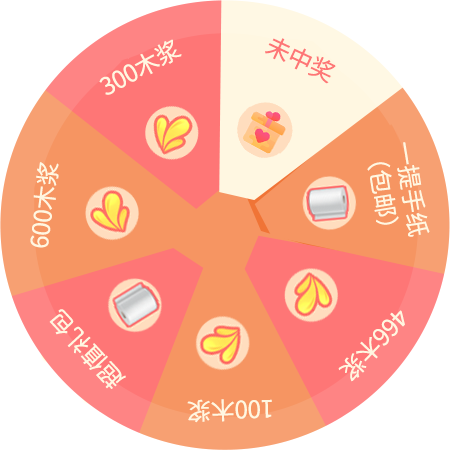
<style>
.page{position:relative;width:450px;height:450px;background:#ffffff}
.page>*{position:absolute;margin:0}
.t1{font:24px "SourceHanSansCN-Regular";color:#fff7e1}
.t2{font:24px "SourceHanSansCN-Regular";color:#fe7676}
</style>
<div class="page">
<p class="t1" style="left:99px;top:39px;width:83px;height:56px;rotate:-29deg">300木浆</p>
<p class="t2" style="left:265px;top:38px;width:71px;height:46px;rotate:25deg">未中奖</p>
<p class="t1" style="left:367px;top:142px;width:63px;height:95px;rotate:81deg">一提手纸<br>（包邮）</p>
<p class="t1" style="left:30px;top:162px;width:29px;height:86px;rotate:-83deg">600木浆</p>
<p class="t1" style="left:49px;top:309px;width:77px;height:80px;rotate:-133deg">超值礼包</p>
<p class="t1" style="left:338px;top:310px;width:67px;height:72px;rotate:133deg">466木浆</p>
<p class="t1" style="left:187px;top:399px;width:85px;height:24px;rotate:179deg">100木浆</p>
</div>
